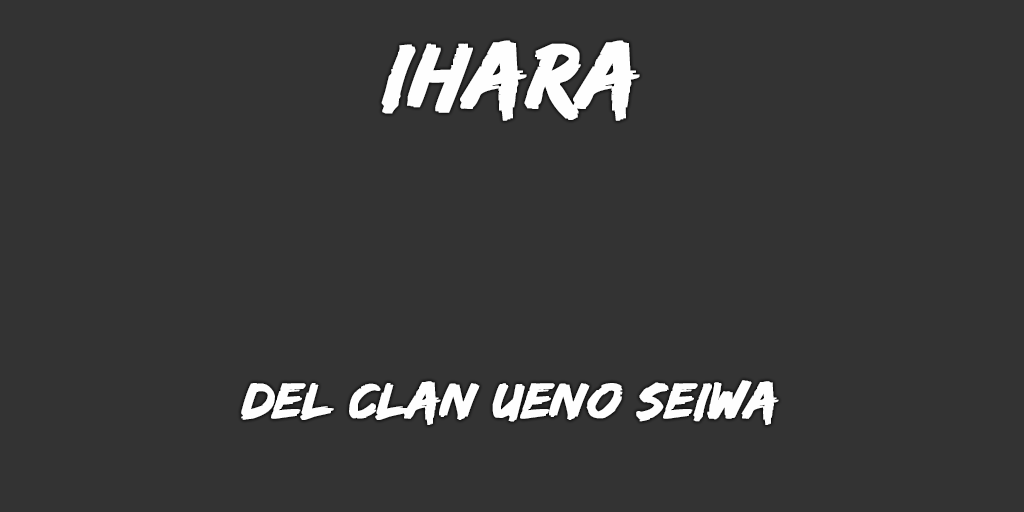
<style>
.page{position:relative;width:1024px;height:512px;background:#333333}
.page>*{position:absolute;margin:0}
.t1{font:95px "EdoSZ";color:#fefefe;font-weight:bold;font-style:italic;scale:1.04 1}
.t2{font:52px "EdoSZ";color:#fefefe;font-weight:bold;font-style:italic;scale:1.04 1}
</style>
<div class="page">
<p class="t1" style="left:381px;top:40px;width:259px;height:81px">ihara</p>
<p class="t2" style="left:241px;top:380px;width:538px;height:45px">DEL clan ueno seiwa</p>
</div>
